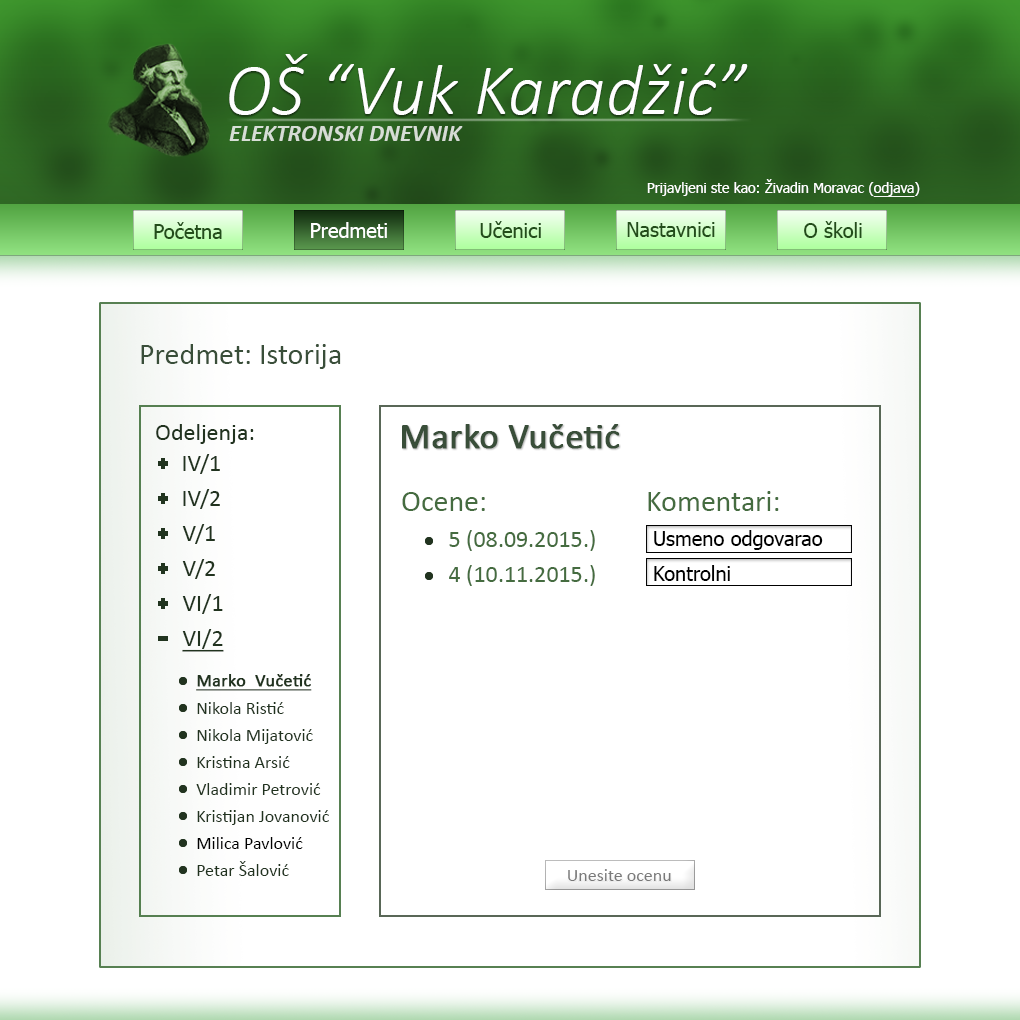
<style>
.page{position:relative;width:1020px;height:1020px;background:#ffffff}
.page>*{position:absolute;margin:0}
.t1{font:72px "Calibri-LightItalic";color:#fefefe}
.t2{font:24px "Calibri-BoldItalic";color:#d6ddd5}
.t3{font:14px "Tahoma";color:#ffffff}
.t4{font:14px "Tahoma";color:#ffffff;text-decoration:underline}
.t5{font:20px "Tahoma";color:#224d1a}
.t6{font:20px "Tahoma";color:#ffffff}
.t7{font:30px "Calibri";color:#394e39}
.t8{font:24px "Calibri";color:#21331f}
.t9{font:36px "Calibri";color:#394e39;font-weight:bold}
.t10{font:30px "Calibri";color:#456c40}
.t11{font:24px "Calibri";color:#456c40}
.t12{font:20px "Tahoma";color:#000000}
.t13{font:24px "Calibri";color:#21331f;text-decoration:underline}
.t14{font:18px "Calibri";color:#21331f;font-weight:bold;text-decoration:underline}
.t15{font:18px "Calibri";color:#21331f}
.t16{font:18px "Calibri";color:#000000}
.t17{font:18px "Calibri";color:#7b7b7b}
</style>
<div class="page">
<p class="t1" style="left:229px;top:54px;width:519px;height:61px">OŠ “Vuk Karadžić”</p>
<p class="t2" style="left:229px;top:126px;width:234px;height:15px">ELEKTRONSKI DNEVNIK</p>
<p class="t3" style="left:647px;top:179px;width:273px;height:18px">Prijavljeni ste kao: Živadin Moravac (<span class="t4">odjava</span>)</p>
<p class="t5" style="left:154px;top:222px;width:68px;height:17px">Početna</p>
<p class="t6" style="left:311px;top:222px;width:76px;height:16px">Predmeti</p>
<p class="t5" style="left:480px;top:221px;width:61px;height:17px">Učenici</p>
<p class="t5" style="left:627px;top:222px;width:88px;height:15px">Nastavnici</p>
<p class="t5" style="left:804px;top:221px;width:58px;height:17px">O školi</p>
<p class="t7" style="left:141px;top:344px;width:200px;height:25px">Predmet: Istorija</p>
<p class="t8" style="left:156px;top:424px;width:98px;height:20px">Odeljenja:</p>
<p class="t9" style="left:402px;top:424px;width:217px;height:25px">Marko Vučetić</p>
<p class="t8" style="left:183px;top:454px;width:37px;height:20px">IV/1</p>
<p class="t8" style="left:183px;top:489px;width:37px;height:20px">IV/2</p>
<p class="t10" style="left:402px;top:492px;width:83px;height:19px">Ocene:</p>
<p class="t10" style="left:648px;top:491px;width:131px;height:20px">Komentari:</p>
<p class="t8" style="left:182px;top:524px;width:33px;height:20px">V/1</p>
<p class="t11" style="left:449px;top:530px;width:146px;height:21px">5 (08.09.2015.)</p>
<p class="t12" style="left:654px;top:530px;width:169px;height:20px">Usmeno odgovarao</p>
<p class="t8" style="left:182px;top:559px;width:33px;height:20px">V/2</p>
<p class="t11" style="left:449px;top:565px;width:146px;height:21px">4 (10.11.2015.)</p>
<p class="t12" style="left:654px;top:565px;width:76px;height:16px">Kontrolni</p>
<p class="t8" style="left:182px;top:594px;width:41px;height:20px">VI/1</p>
<p class="t13" style="left:182px;top:629px;width:42px;height:23px">VI/2</p>
<p class="t14" style="left:196px;top:674px;width:116px;height:17px">Marko  Vučetić</p>
<p class="t15" style="left:197px;top:702px;width:87px;height:12px">Nikola Ristić</p>
<p class="t15" style="left:197px;top:729px;width:116px;height:15px">Nikola Mijatović</p>
<p class="t15" style="left:197px;top:756px;width:93px;height:12px">Kristina Arsić</p>
<p class="t15" style="left:196px;top:783px;width:125px;height:12px">Vladimir Petrović</p>
<p class="t15" style="left:197px;top:810px;width:132px;height:15px">Kristijan Jovanović</p>
<p class="t16" style="left:197px;top:837px;width:106px;height:12px">Milica Pavlović</p>
<p class="t15" style="left:197px;top:861px;width:92px;height:15px">Petar Šalović</p>
<p class="t17" style="left:568px;top:869px;width:103px;height:12px">Unesite ocenu</p>
</div>
